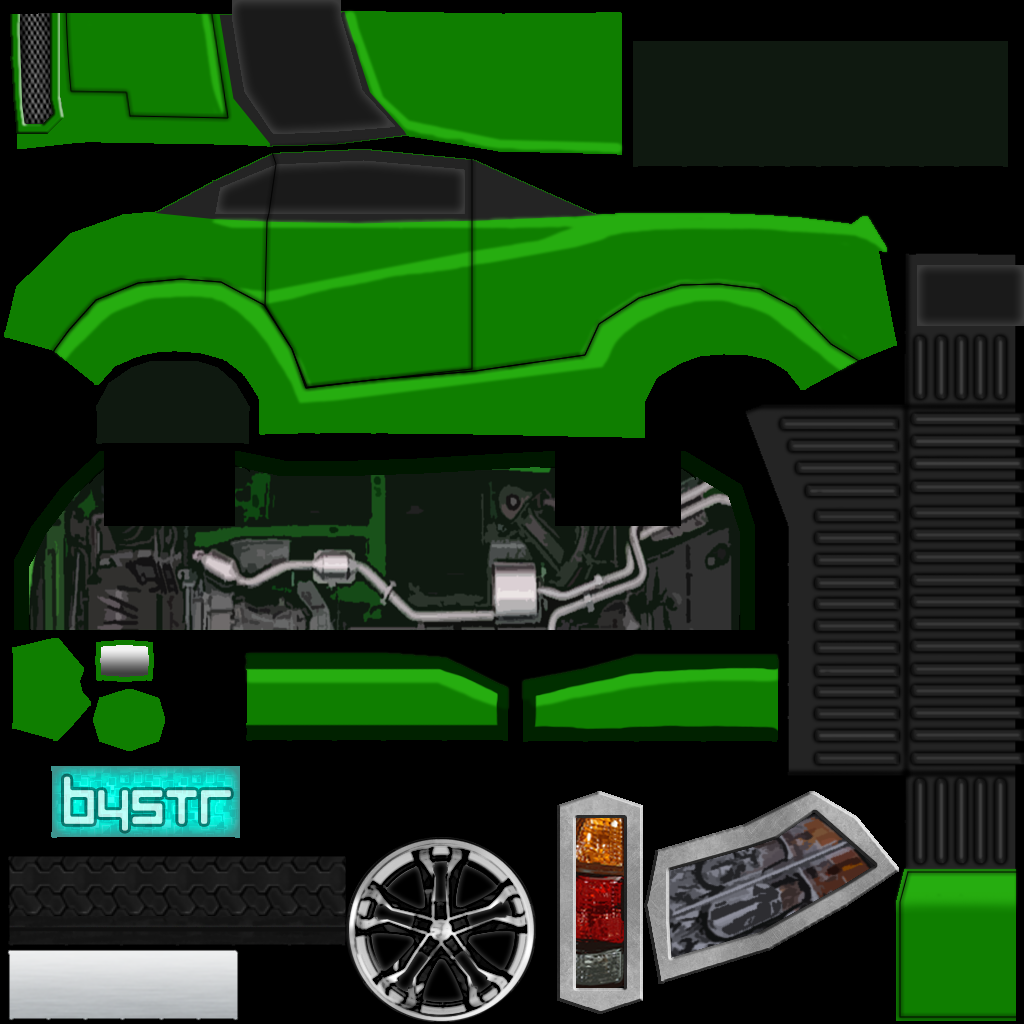
<style>
.page{position:relative;width:1024px;height:1024px;background:#000000}
.page>*{position:absolute;margin:0}
.t1{font:60.1px "LuggageRoundRegular";color:#b8f9f1;scale:0.89 1}
</style>
<div class="page">
<p class="t1" style="left:64px;top:776px;width:167px;height:55px">b45tr</p>
</div>
